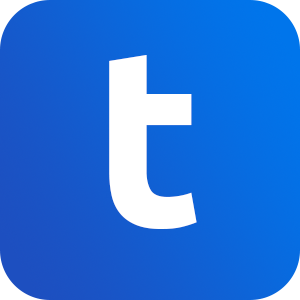
<style>
.page{position:relative;width:300px;height:300px}
.page>*{position:absolute;margin:0}
.t1{font:250px "Ubuntu-Bold";color:#ffffff}
</style>
<div class="page">
<p class="t1" style="left:109px;top:55px;width:88px;height:174px">t</p>
</div>
